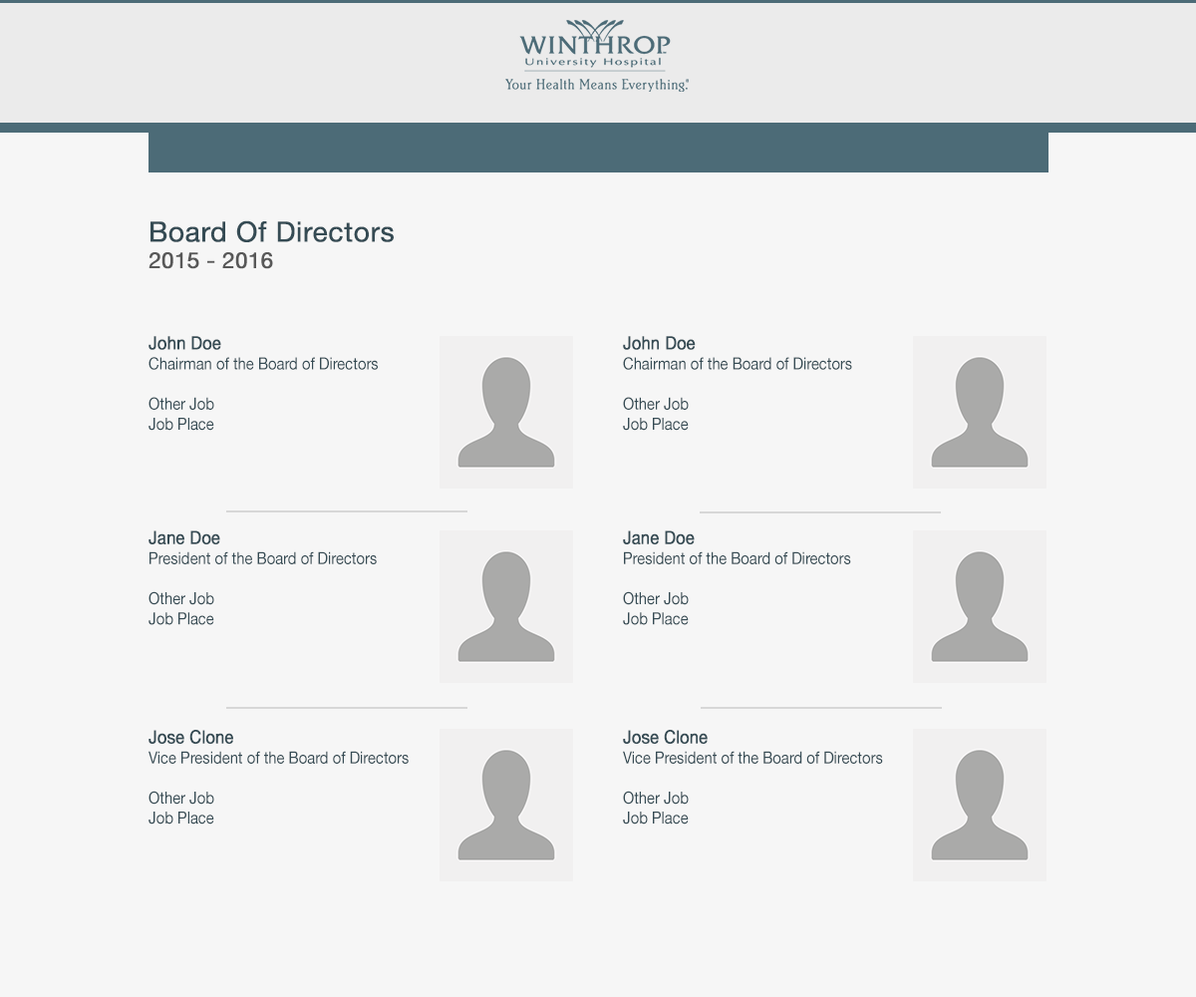
<style>
.page{position:relative;width:1196px;height:997px;background:#f6f6f6}
.page>*{position:absolute;margin:0}
.t1{font:27.9px "HelveticaNeue";color:#354b54;font-weight:bold}
.t2{font:21.9px "HelveticaNeue";color:#585858;font-weight:bold}
.t3{font:16.7px "HelveticaNeue";color:#354b54;scale:0.88 1}
.t4{font:18.3px "HelveticaNeue";color:#354b54;font-weight:bold;scale:0.88 1}
</style>
<div class="page">
<p class="t1" style="left:149px;top:220px;width:245px;height:49px">Board Of Directors<br><span class="t2">2015 - 2016</span></p>
<p class="t3" style="left:149px;top:336px;width:229px;height:95px;text-align:justify"><span class="t4">John Doe<br></span>Chairman of the Board of Directors<br><br>Other Job<br>Job Place</p>
<p class="t3" style="left:623px;top:336px;width:229px;height:95px;text-align:justify"><span class="t4">John Doe<br></span>Chairman of the Board of Directors<br><br>Other Job<br>Job Place</p>
<p class="t3" style="left:149px;top:530px;width:228px;height:95px;text-align:justify"><span class="t4">Jane Doe<br></span>President of the Board of Directors<br><br>Other Job<br>Job Place</p>
<p class="t3" style="left:623px;top:530px;width:228px;height:95px;text-align:justify"><span class="t4">Jane Doe<br></span>President of the Board of Directors<br><br>Other Job<br>Job Place</p>
<p class="t3" style="left:149px;top:730px;width:260px;height:94px;text-align:justify"><span class="t4">Jose Clone<br></span>Vice President of the Board of Directors<br><br>Other Job<br>Job Place</p>
<p class="t3" style="left:623px;top:730px;width:260px;height:94px;text-align:justify"><span class="t4">Jose Clone<br></span>Vice President of the Board of Directors<br><br>Other Job<br>Job Place</p>
</div>
